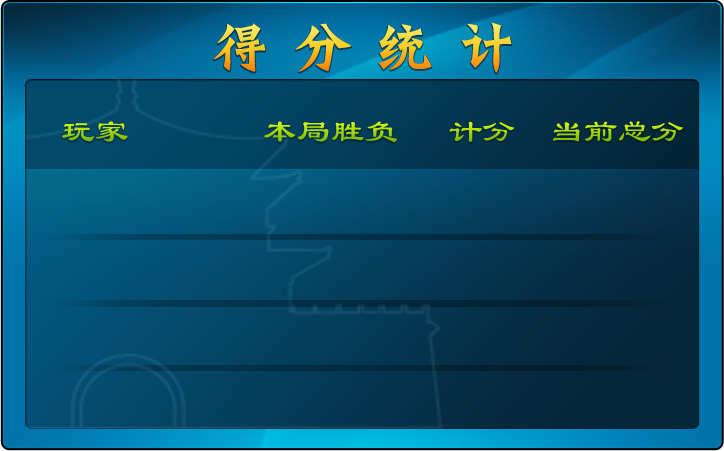
<style>
.page{position:relative;width:724px;height:451px}
.page>*{position:absolute;margin:0}
.t1{font:55.8px "HYh3gj";letter-spacing:0.4em;scale:1.05 1}
.t2{font:32px "LiSu";scale:1.05 1}
</style>
<div class="page">
<p class="t1" style="left:213px;top:22px;width:299px;height:51px">得分统计</p>
<p class="t2" style="left:62px;top:121px;width:622px;height:21px">玩家        本局胜负   计分  当前总分</p>
</div>
